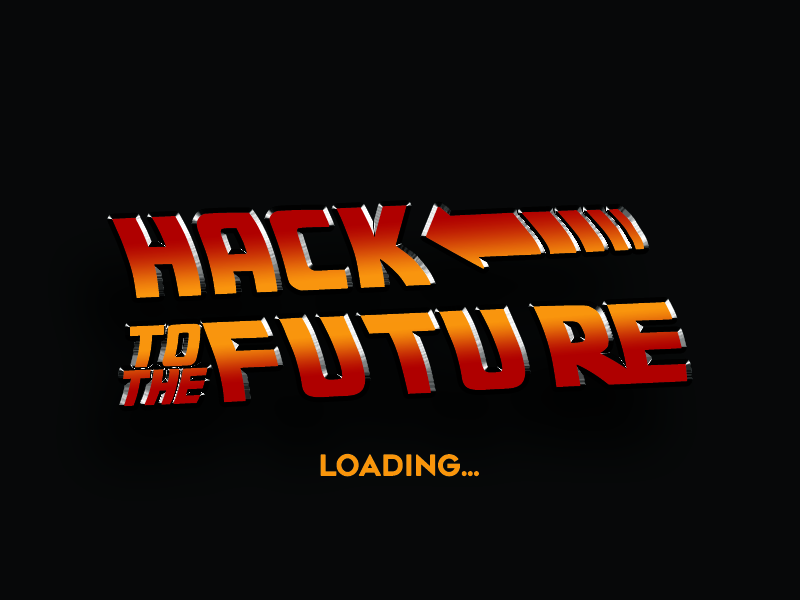
<style>
.page{position:relative;width:800px;height:600px;background:#070809}
.page>*{position:absolute;margin:0}
.t1{font:89.8px "Backtothefuture2002-Regular";font-weight:bold}
.t2{font:116.7px "Backtothefuture2002-Regular";letter-spacing:0.32em;font-weight:bold;scale:1.61 1}
.t3{font:28px "Geometos";color:#f9950b;font-weight:bold}
</style>
<div class="page">
<p class="t1" style="left:112px;top:205px;width:576px;height:202px;rotate:-3deg">HACK<span class="t2">&lt;<br></span>&amp;FUTU;</p>
<p class="t3" style="left:320px;top:453px;width:159px;height:24px">LOADING...</p>
</div>
